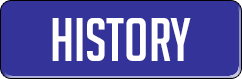
<style>
.page{position:relative;width:242px;height:79px;background:#333399}
.page>*{position:absolute;margin:0}
.t1{font:60px "BigNoodleTitling";color:#ffffff}
</style>
<div class="page">
<p class="t1" style="left:52px;top:18px;width:139px;height:43px">History</p>
</div>
